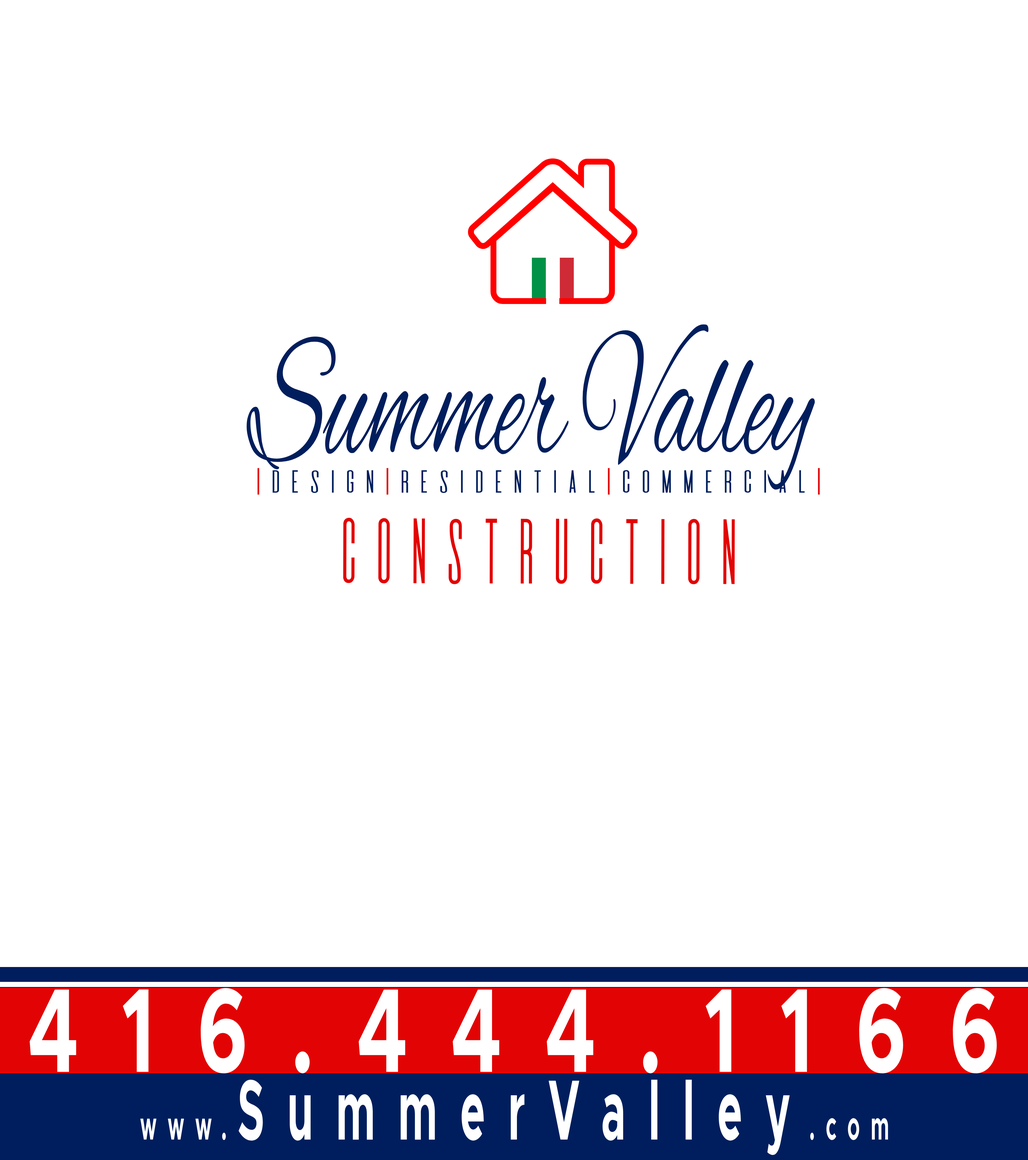
<style>
.page{position:relative;width:1028px;height:1160px;background:#ffffff}
.page>*{position:absolute;margin:0}
.t1{font:184.4px "AlexBrush-Regular";color:#001e5d;scale:0.55 1}
.t2{font:27.9px "DeValencia-Regular";color:#001e5d;scale:1.2 1}
.t3{font:27.9px "DeValencia-Regular";color:#e20404;scale:1.2 1}
.t4{font:80.9px "DeValencia-Regular";color:#e20404;scale:0.74 1}
.t5{font:120px "Metropolis-Bold";letter-spacing:0.542em;color:#ffffff;scale:0.66 1}
.t6{font:85.7px "Metropolis-Bold";letter-spacing:0.542em;color:#ffffff;scale:0.49 1}
.t7{font:40.5px "Metropolis-Bold";letter-spacing:0.542em;color:#ffffff;scale:0.49 1}
</style>
<div class="page">
<p class="t1" style="left:246px;top:324px;width:569px;height:166px">Summer Valley</p>
<p class="t2" style="left:257px;top:468px;width:563px;height:27px"><span class="t3">|</span>Design<span class="t3">|</span>Residential<span class="t3">|</span>Commercial<span class="t3">|</span></p>
<p class="t4" style="left:343px;top:518px;width:392px;height:66px">Construction</p>
<p class="t5" style="left:30px;top:988px;width:967px;height:86px">416.444.1166</p>
<p class="t6" style="left:140px;top:1080px;width:748px;height:75px"><span class="t7">www.</span>SummerValley<span class="t7">.com</span></p>
</div>
